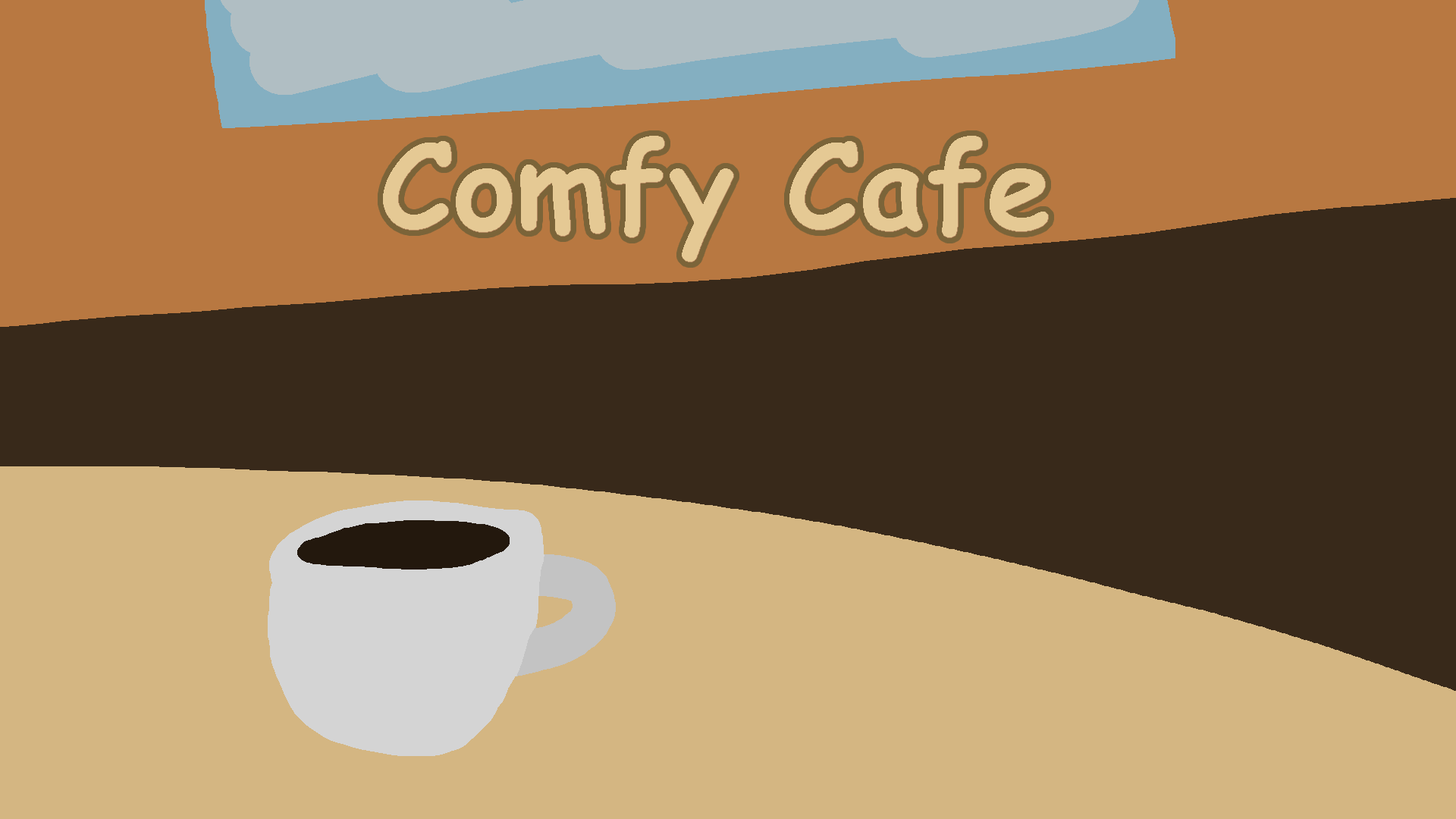
<style>
.page{position:relative;width:1456px;height:819px;background:#38291a}
.page>*{position:absolute;margin:0}
.t1{font:119.1px "ComicSansMS-Bold";color:#e5c994}
</style>
<div class="page">
<p class="t1" style="left:383px;top:136px;width:666px;height:126px">Comfy Cafe</p>
</div>
